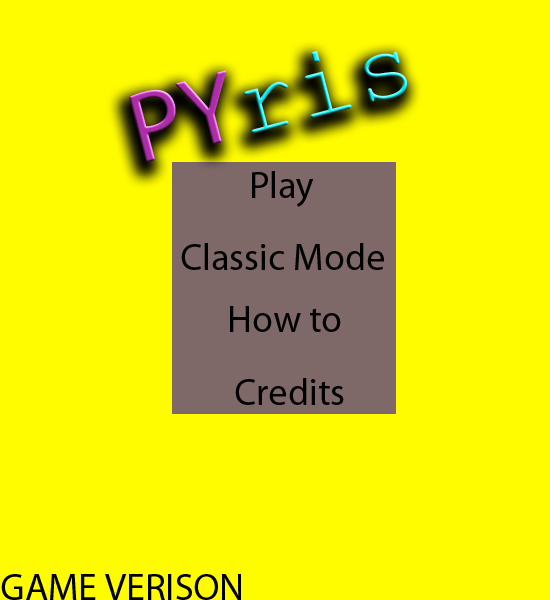
<style>
.page{position:relative;width:550px;height:600px;background:#fffc00}
.page>*{position:absolute;margin:0}
.t1{font:101px "CourierNewPSMT"}
.t2{font:101px "MyriadPro-Regular"}
.t3{font:38px "MyriadPro-Regular";color:#000000}
</style>
<div class="page">
<p class="t1" style="left:129px;top:51px;width:278px;height:112px;rotate:-15deg"><span class="t2">PY</span>ris</p>
<p class="t3" style="left:252px;top:171px;width:62px;height:36px">Play</p>
<p class="t3" style="left:181px;top:243px;width:203px;height:27px">Classic Mode</p>
<p class="t3" style="left:230px;top:306px;width:111px;height:26px">How to</p>
<p class="t3" style="left:235px;top:378px;width:109px;height:27px">Credits</p>
<p class="t3" style="left:1px;top:574px;width:240px;height:26px">GAME VERISON</p>
</div>
